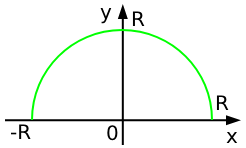
<style>
.page{position:relative;width:246px;height:148px;background:#ffffff}
.page>*{position:absolute;margin:0}
.t1{font:20px "DejaVuSans";color:#000000}
</style>
<div class="page">
<p class="t1" style="left:100px;top:8px;width:12px;height:16px">y</p>
<p class="t1" style="left:132px;top:11px;width:13px;height:15px">R</p>
<p class="t1" style="left:216px;top:95px;width:13px;height:15px">R</p>
<p class="t1" style="left:10px;top:124px;width:21px;height:15px">-R</p>
<p class="t1" style="left:107px;top:125px;width:11px;height:16px">0</p>
<p class="t1" style="left:226px;top:132px;width:12px;height:11px">x</p>
</div>
